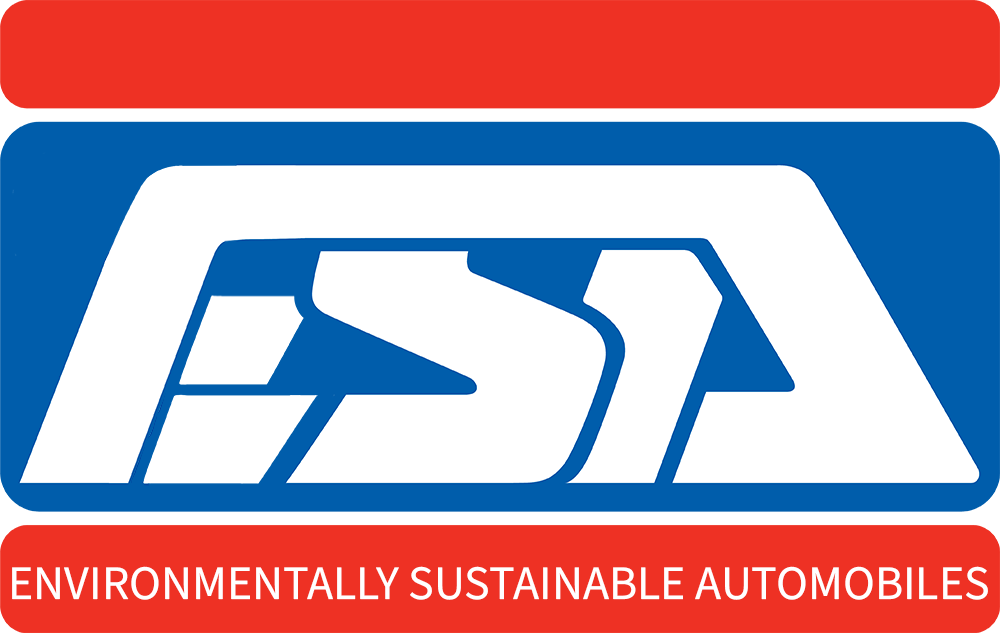
<style>
.page{position:relative;width:1000px;height:633px;background:#ffffff}
.page>*{position:absolute;margin:0}
.t1{font:48px "SourceSansRoman-Regular";color:#ffffff}
</style>
<div class="page">
<p class="t1" style="left:12px;top:566px;width:976px;height:34px">ENVIRONMENTALLY SUSTAINABLE AUTOMOBILES</p>
</div>
